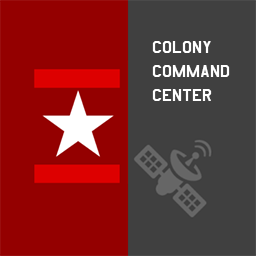
<style>
.page{position:relative;width:256px;height:256px;background:#404040}
.page>*{position:absolute;margin:0}
.t1{font:20px "AmarilloUSAF";color:#ffffff}
</style>
<div class="page">
<p class="t1" style="left:152px;top:41px;width:78px;height:60px">colony<br>command<br>center</p>
</div>
